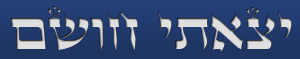
<style>
.page{position:relative;width:300px;height:59px}
.page>*{position:absolute;margin:0}
.t1{font:54px "GuttmanStamNormal";color:#dfdfdf}
</style>
<div class="page">
<p class="t1" style="left:10px;top:6px;width:282px;height:46px">םשוח יתאצי</p>
</div>
